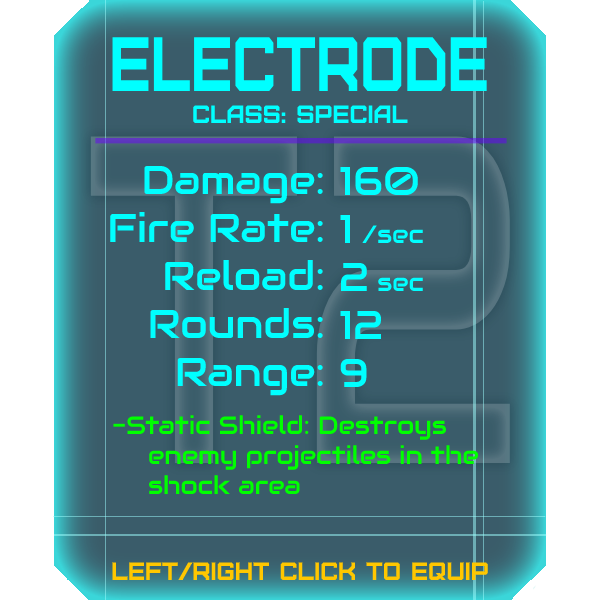
<style>
.page{position:relative;width:600px;height:600px;background:#3a5c6a}
.page>*{position:absolute;margin:0}
.t1{font:76.8px "Furore";color:#00ffff;scale:0.79 1}
.t2{font:25px "Furore";color:#00ffff}
.t3{font:40px "Audiowide-Regular";color:#00ffff}
.t4{font:25px "Audiowide-Regular";color:#00ffff}
.t5{font:25px "Audiowide-Regular";color:#00ff00}
.t6{font:25px "Furore";color:#ffc700}
</style>
<div class="page">
<p class="t1" style="left:112px;top:37px;width:375px;height:54px">Electrode</p>
<p class="t2" style="left:193px;top:105px;width:215px;height:18px">Class: Special</p>
<p class="t3" style="left:110px;top:165px;width:213px;height:231px;text-align:right">Damage:<br>Fire Rate:<br>Reload:<br>Rounds:<br>Range:</p>
<p class="t3" style="left:340px;top:166px;width:83px;height:221px">160<br>1 <span class="t4">/sec<br></span>2 <span class="t4">sec<br></span>12<br>9</p>
<p class="t5" style="left:113px;top:415px;width:366px;height:79px">-Static Shield: Destroys<br> enemy projectiles in the<br> shock area</p>
<p class="t6" style="left:112px;top:562px;width:376px;height:18px">left/right click to equip</p>
</div>
